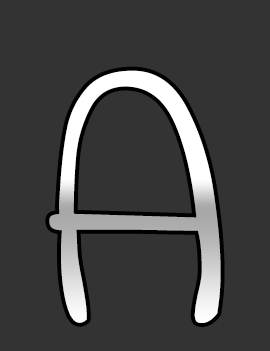
<style>
.page{position:relative;width:270px;height:351px;background:#333333}
.page>*{position:absolute;margin:0}
.t1{font:331.3px "IndieFlower-Regular"}
</style>
<div class="page">
<p class="t1" style="left:49px;top:70px;width:172px;height:253px">A</p>
</div>
